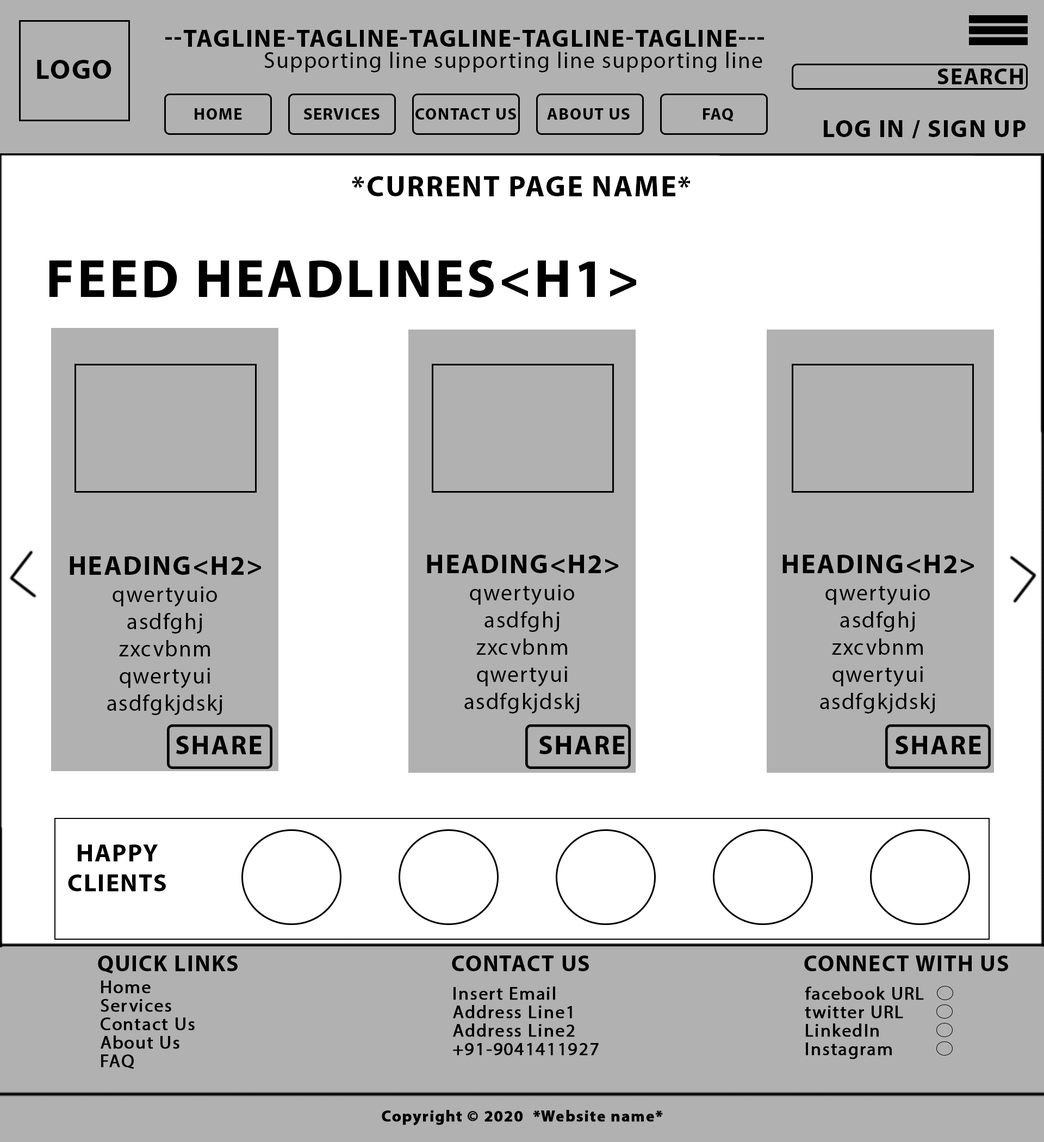
<style>
.page{position:relative;width:1044px;height:1142px;background:#b1b1b1}
.page>*{position:absolute;margin:0}
.t1{font:24.9px "MyriadPro-Bold";letter-spacing:0.05em;color:#000000;text-transform:uppercase}
.t2{font:22.7px "MyriadPro-Regular";letter-spacing:0.05em;color:#000000}
.t3{font:28px "MyriadPro-Bold";letter-spacing:0.05em;color:#000000;text-transform:uppercase}
.t4{font:22.7px "MyriadPro-Bold";letter-spacing:0.05em;color:#000000;text-transform:uppercase}
.t5{font:16.7px "MyriadPro-Bold";letter-spacing:0.05em;color:#000000;text-transform:uppercase}
.t6{font:29.4px "MyriadPro-Bold";letter-spacing:0.05em;color:#000000;text-transform:uppercase}
.t7{font:54.4px "MyriadPro-Bold";letter-spacing:0.05em;color:#000000;text-transform:uppercase}
.t8{font:27.2px "MyriadPro-Bold";letter-spacing:0.05em;color:#000000;text-transform:uppercase}
.t9{font:18.1px "MyriadPro-Regular";letter-spacing:0.05em;color:#000000;font-weight:bold}
.t10{font:27.2px "MyriadPro-Bold";letter-spacing:0.05em;color:#000000;font-weight:bold}
</style>
<div class="page">
<p class="t1" style="left:165px;top:30px;width:599px;height:17px">--Tagline-tagline-tagline-tagline-tagline---</p>
<p class="t2" style="left:264px;top:52px;width:498px;height:20px">Supporting line supporting line supporting line</p>
<p class="t3" style="left:37px;top:60px;width:74px;height:19px">logo</p>
<p class="t4" style="left:938px;top:69px;width:85px;height:15px">sEARCH</p>
<p class="t5" style="left:195px;top:108px;width:47px;height:12px">Home</p>
<p class="t5" style="left:304px;top:108px;width:76px;height:12px">Services</p>
<p class="t5" style="left:415px;top:108px;width:101px;height:12px">Contact Us</p>
<p class="t5" style="left:547px;top:108px;width:83px;height:12px">About Us</p>
<p class="t5" style="left:703px;top:108px;width:30px;height:14px">FAQ</p>
<p class="t1" style="left:824px;top:120px;width:202px;height:19px">LOG IN / SIGN UP</p>
<p class="t6" style="left:352px;top:176px;width:338px;height:20px">*Current Page Name*</p>
<p class="t7" style="left:49px;top:260px;width:587px;height:37px">Feed Headlines&lt;H1&gt;</p>
<p class="t2" style="left:70px;top:556px;width:191px;height:159px;text-align:center"><span class="t8">Heading&lt;H2&gt;<br></span>qwertyuio<br>asdfghj<br>zxcvbnm<br>qwertyui<br>asdfgkjdskj</p>
<p class="t2" style="left:427px;top:555px;width:191px;height:158px;text-align:center"><span class="t8">Heading&lt;H2&gt;<br></span>qwertyuio<br>asdfghj<br>zxcvbnm<br>qwertyui<br>asdfgkjdskj</p>
<p class="t2" style="left:783px;top:555px;width:191px;height:158px;text-align:center"><span class="t8">Heading&lt;H2&gt;<br></span>qwertyuio<br>asdfghj<br>zxcvbnm<br>qwertyui<br>asdfgkjdskj</p>
<p class="t8" style="left:176px;top:736px;width:86px;height:18px">Share</p>
<p class="t8" style="left:539px;top:736px;width:86px;height:18px">Share</p>
<p class="t8" style="left:896px;top:736px;width:85px;height:18px">Share</p>
<p class="t1" style="left:68px;top:845px;width:98px;height:46px;text-align:center">Happy<br>Clients</p>
<p class="t4" style="left:98px;top:955px;width:140px;height:19px">Quick Links</p>
<p class="t4" style="left:452px;top:955px;width:137px;height:16px">cONTACT uS</p>
<p class="t4" style="left:804px;top:955px;width:204px;height:16px">Connect with us</p>
<p class="t9" style="left:101px;top:981px;width:50px;height:13px">Home</p>
<p class="t9" style="left:454px;top:986px;width:101px;height:14px">Insert Email</p>
<p class="t9" style="left:805px;top:986px;width:119px;height:14px">facebook URL</p>
<p class="t9" style="left:101px;top:999px;width:70px;height:13px">Services</p>
<p class="t9" style="left:453px;top:1005px;width:119px;height:14px">Address Line1</p>
<p class="t9" style="left:805px;top:1006px;width:98px;height:13px">twitter URL</p>
<p class="t9" style="left:101px;top:1017px;width:94px;height:14px">Contact Us</p>
<p class="t9" style="left:453px;top:1023px;width:122px;height:14px">Address Line2</p>
<p class="t9" style="left:806px;top:1023px;width:73px;height:14px">LinkedIn</p>
<p class="t9" style="left:101px;top:1035px;width:78px;height:14px">About Us</p>
<p class="t9" style="left:453px;top:1043px;width:146px;height:13px">+91-9041411927</p>
<p class="t9" style="left:806px;top:1043px;width:86px;height:16px">Instagram</p>
<p class="t9" style="left:101px;top:1054px;width:33px;height:15px">FAQ</p>
<p class="t10" style="left:382px;top:1110px;width:281px;height:16px">Copyright © 2020  *Website name*</p>
</div>
